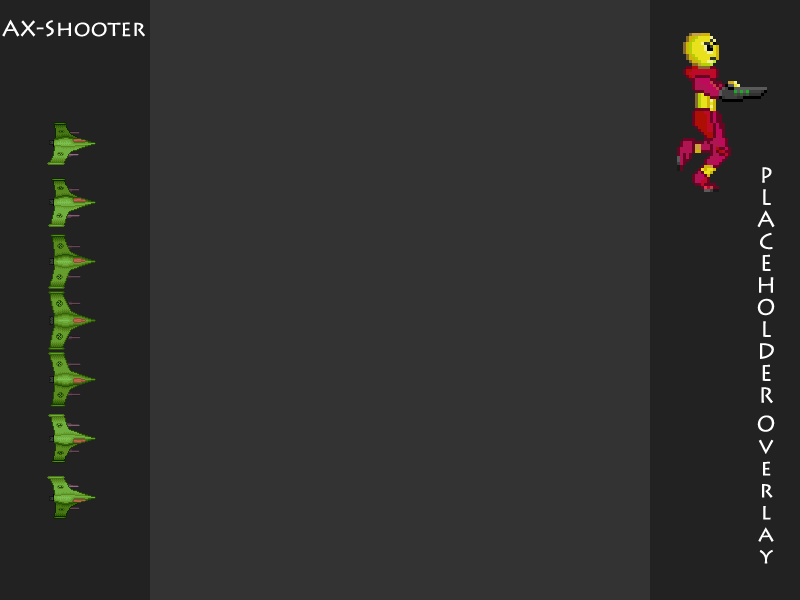
<style>
.page{position:relative;width:800px;height:600px;background:#333333}
.page>*{position:absolute;margin:0}
.t1{font:22px "LithosPro-Regular";color:#ffffff}
</style>
<div class="page">
<p class="t1" style="left:2px;top:19px;width:143px;height:18px">AX-Shooter</p>
<p class="t1" style="left:757px;top:167px;width:18px;height:397px">PLACEHOLDER Overlay</p>
</div>
